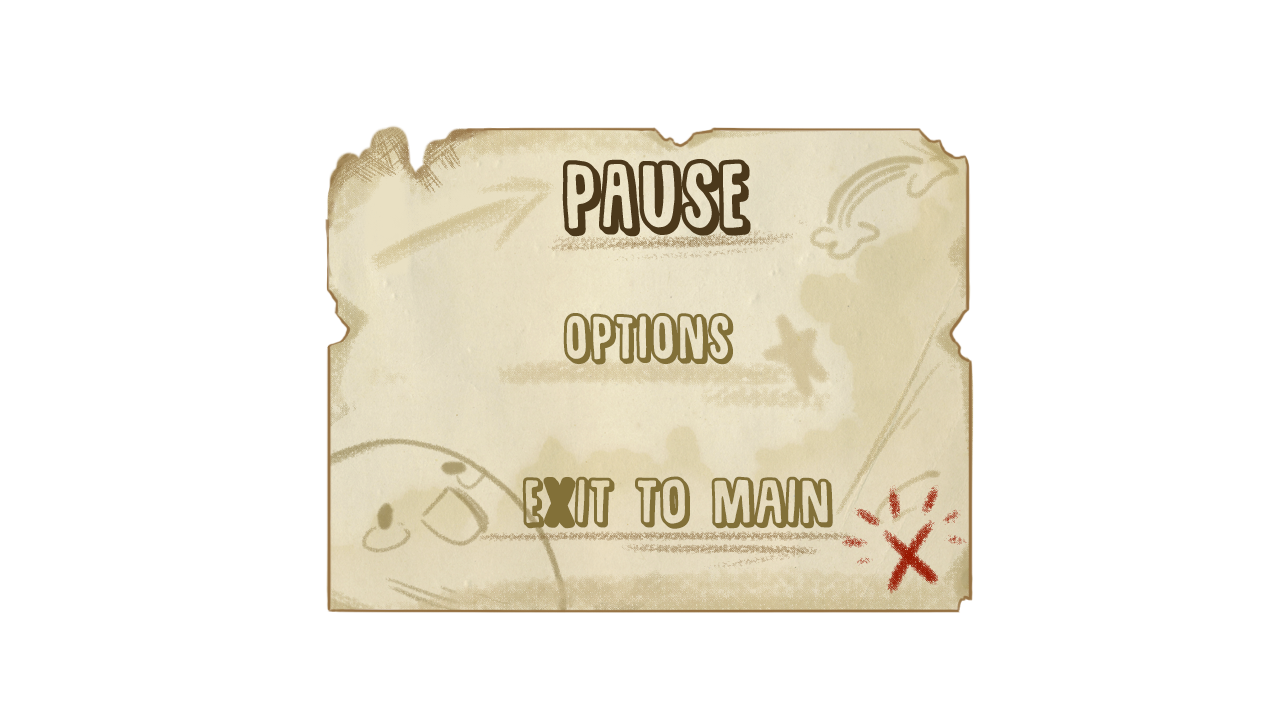
<style>
.page{position:relative;width:1280px;height:720px;background:#ffffff}
.page>*{position:absolute;margin:0}
.t1{font:48px "SugarpunchDEMO";color:#837139;font-weight:bold}
.t2{font:48px "SugarpunchDEMO";color:#827038;font-weight:bold}
</style>
<div class="page">
<p class="t1" style="left:563px;top:313px;width:171px;height:52px">options</p>
<p class="t2" style="left:522px;top:476px;width:311px;height:53px">EXIT  TO  MAIN</p>
</div>
